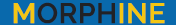
<style>
.page{position:relative;width:176px;height:25px;background:#0969ac}
.page>*{position:absolute;margin:0}
.t1{font:28px "Raleway-SemiBold";color:#212226;font-weight:bold}
.t2{font:28px "Raleway-SemiBold";color:#f4c613;font-weight:bold}
</style>
<div class="page">
<p class="t1" style="left:13px;top:2px;width:152px;height:22px"><span class="t2">M</span>ORPH<span class="t2">INE</span></p>
</div>
